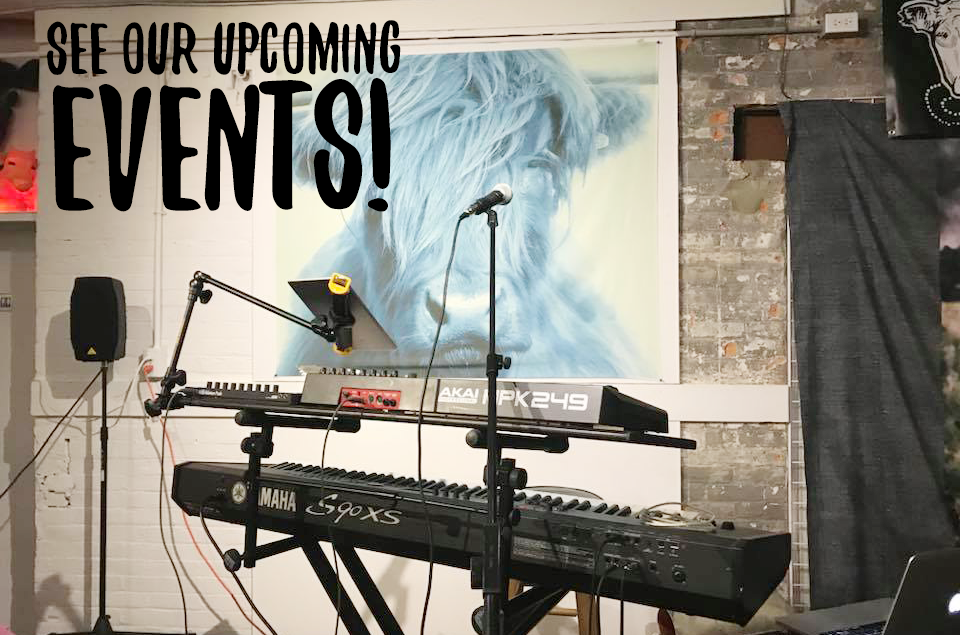
<style>
.page{position:relative;width:960px;height:635px}
.page>*{position:absolute;margin:0}
.t1{font:80px/115.6px "YeahPapa";color:#000000}
.t2{font:195px/135px "YeahPapa";color:#000000}
</style>
<div class="page">
<p class="t1" style="left:47px;top:20px;width:354px;height:192px;text-align:center">See OUR UPCOMING <br><span class="t2">Events!</span></p>
</div>
